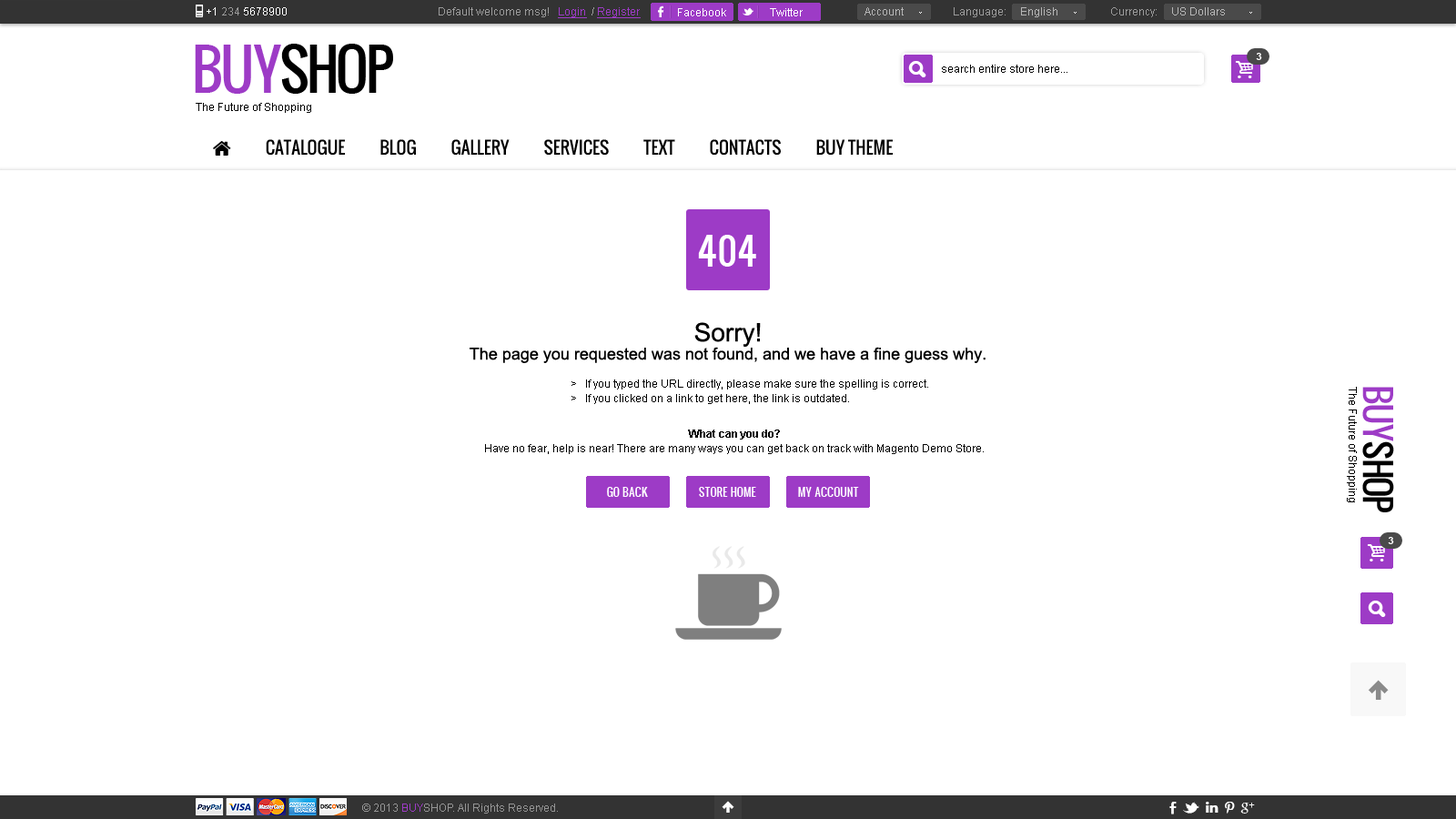
<style>
.page{position:relative;width:1456px;height:819px;background:#ffffff}
.page>*{position:absolute;margin:0}
.t1{font:10.9px "ArialMT";color:#ffffff}
.t2{font:10.9px "ArialMT";color:#9b9b9b}
.t3{font:10.9px "ArialMT";color:#9d3bc6;text-decoration:underline}
.t4{font:10.9px "ArialMT";color:#b6b6b6}
.t5{font:54.6px "Oswald";letter-spacing:-0.06em;color:#000000;text-transform:uppercase}
.t6{font:54.6px "Oswald";letter-spacing:-0.06em;color:#9d3bc6;text-transform:uppercase}
.t7{font:10px "Arial-BoldMT";color:#ffffff;text-transform:uppercase}
.t8{font:10.9px "ArialMT";color:#000000}
.t9{font:36.4px "Oswald";color:#ffffff}
.t10{font:16.4px/18.2px "ArialMT";color:#000000}
.t11{font:25.5px/18.2px "ArialMT";color:#000000}
.t12{font:10.9px/14.6px "ArialMT";color:#000000}
.t13{font:34.6px "Oswald";letter-spacing:-0.06em;color:#000000;text-transform:uppercase}
.t14{font:34.6px "Oswald";letter-spacing:-0.06em;color:#9d3bc6;text-transform:uppercase}
.t15{font:10.9px/14.6px "Arial-BoldMT";color:#000000}
.t16{font:10.9px "Oswald";color:#ffffff;text-transform:uppercase}
.t17{font:10.9px "ArialMT";color:#959595}
.t18{font:10.9px "ArialMT";color:#9d3bc6}
</style>
<div class="page">
<p class="t1" style="left:207px;top:7px;width:80px;height:8px">+1 <span class="t2">234 </span>5678900</p>
<p class="t2" style="left:439px;top:7px;width:202px;height:11px">Default welcome msg!   <span class="t3">Login </span> / <span class="t3">Register</span></p>
<p class="t2" style="left:439px;top:7px;width:202px;height:11px">Default welcome msg!   <span class="t3">Login </span> / <span class="t3">Register</span></p>
<p class="t1" style="left:678px;top:8px;width:48px;height:8px">Facebook</p>
<p class="t1" style="left:770px;top:8px;width:33px;height:8px">Twitter</p>
<p class="t4" style="left:864px;top:7px;width:40px;height:8px">Account</p>
<p class="t2" style="left:954px;top:7px;width:103px;height:10px">Language:     <span class="t4">English</span></p>
<p class="t4" style="left:1111px;top:7px;width:114px;height:10px"><span class="t2">Currency:     </span>US Dollars</p>
<p class="t5" style="left:195px;top:44px;width:198px;height:50px"><span class="t6">buy</span>shop</p>
<p class="t7" style="left:1256px;top:53px;width:6px;height:7px">3</p>
<p class="t8" style="left:942px;top:65px;width:125px;height:8px">search entire store here...</p>
<p class="t8" style="left:196px;top:103px;width:115px;height:10px">The Future of Shopping</p>
<p class="t9" style="left:698px;top:235px;width:58px;height:32px">404</p>
<p class="t10" style="left:470px;top:322px;width:516px;height:41px;text-align:center"><span class="t11">Sorry!<br></span>The page you requested was not found, and we have a fine guess why.</p>
<p class="t12" style="left:571px;top:379px;width:357px;height:25px">&gt;   If you typed the URL directly, please make sure the spelling is correct.<br>&gt;   If you clicked on a link to get here, the link is outdated.</p>
<p class="t8" style="left:1347px;top:387px;width:10px;height:115px;rotate:90deg">The Future of Shopping</p>
<p class="t13" style="left:1362px;top:387px;width:32px;height:125px;rotate:90deg"><span class="t14">buy</span>shop</p>
<p class="t12" style="left:485px;top:430px;width:499px;height:24px;text-align:center"><span class="t15">What can you do?<br></span>Have no fear, help is near! There are many ways you can get back on track with Magento Demo Store.</p>
<p class="t16" style="left:607px;top:487px;width:41px;height:10px">Go Back</p>
<p class="t16" style="left:699px;top:487px;width:57px;height:10px">Store Home</p>
<p class="t16" style="left:798px;top:487px;width:61px;height:10px">My Account</p>
<p class="t7" style="left:1388px;top:537px;width:6px;height:7px">3</p>
<p class="t17" style="left:362px;top:804px;width:196px;height:10px">© 2013 <span class="t18">BUY</span>SHOP. All Rights Reserved.</p>
</div>
